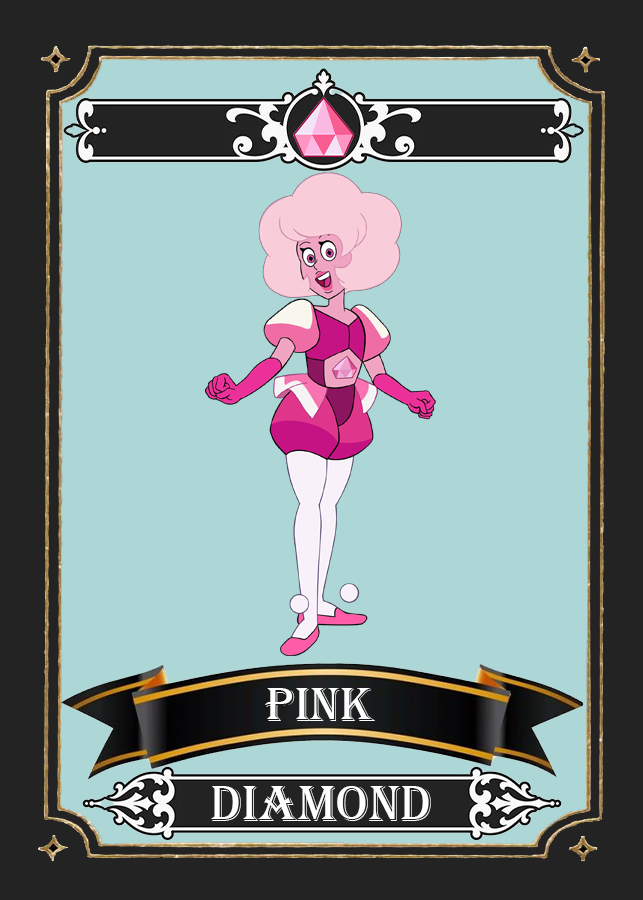
<style>
.page{position:relative;width:643px;height:900px;background:#add7d6}
.page>*{position:absolute;margin:0}
.t1{font:50.4px "Algerian";color:#ffffff}
.t2{font:52.6px "Algerian";color:#ffffff}
</style>
<div class="page">
<p class="t1" style="left:265px;top:688px;width:110px;height:33px">Pink</p>
<p class="t2" style="left:211px;top:786px;width:220px;height:35px">Diamond</p>
</div>
